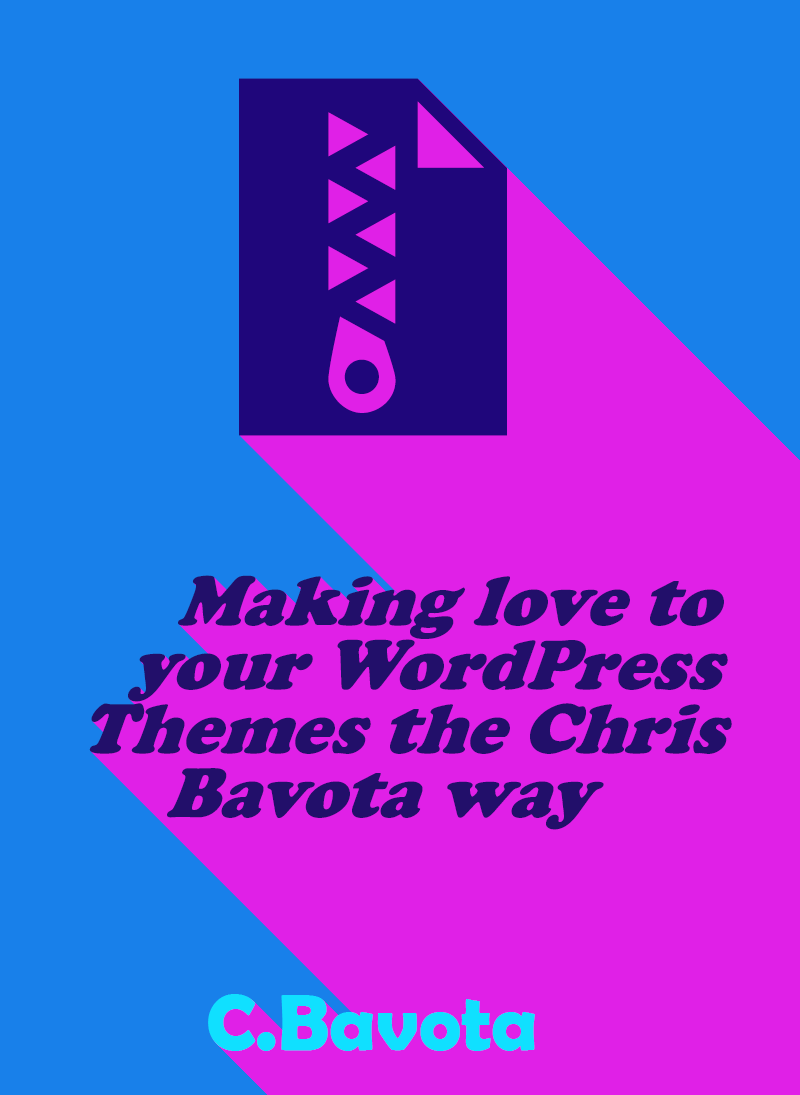
<style>
.page{position:relative;width:800px;height:1095px;background:#1880ea}
.page>*{position:absolute;margin:0}
.t1{font:77.5px/67.9px "CooperBlack";color:#220f6a;scale:0.94 1}
.t2{font:80px "BerlinSansFBDemi-Bold";color:#10e0ff}
</style>
<div class="page">
<p class="t1" style="left:89px;top:575px;width:643px;height:255px;text-align:center">Making love to your WordPress Themes the Chris Bavota way</p>
<p class="t2" style="left:208px;top:994px;width:327px;height:57px">C.Bavota</p>
</div>
